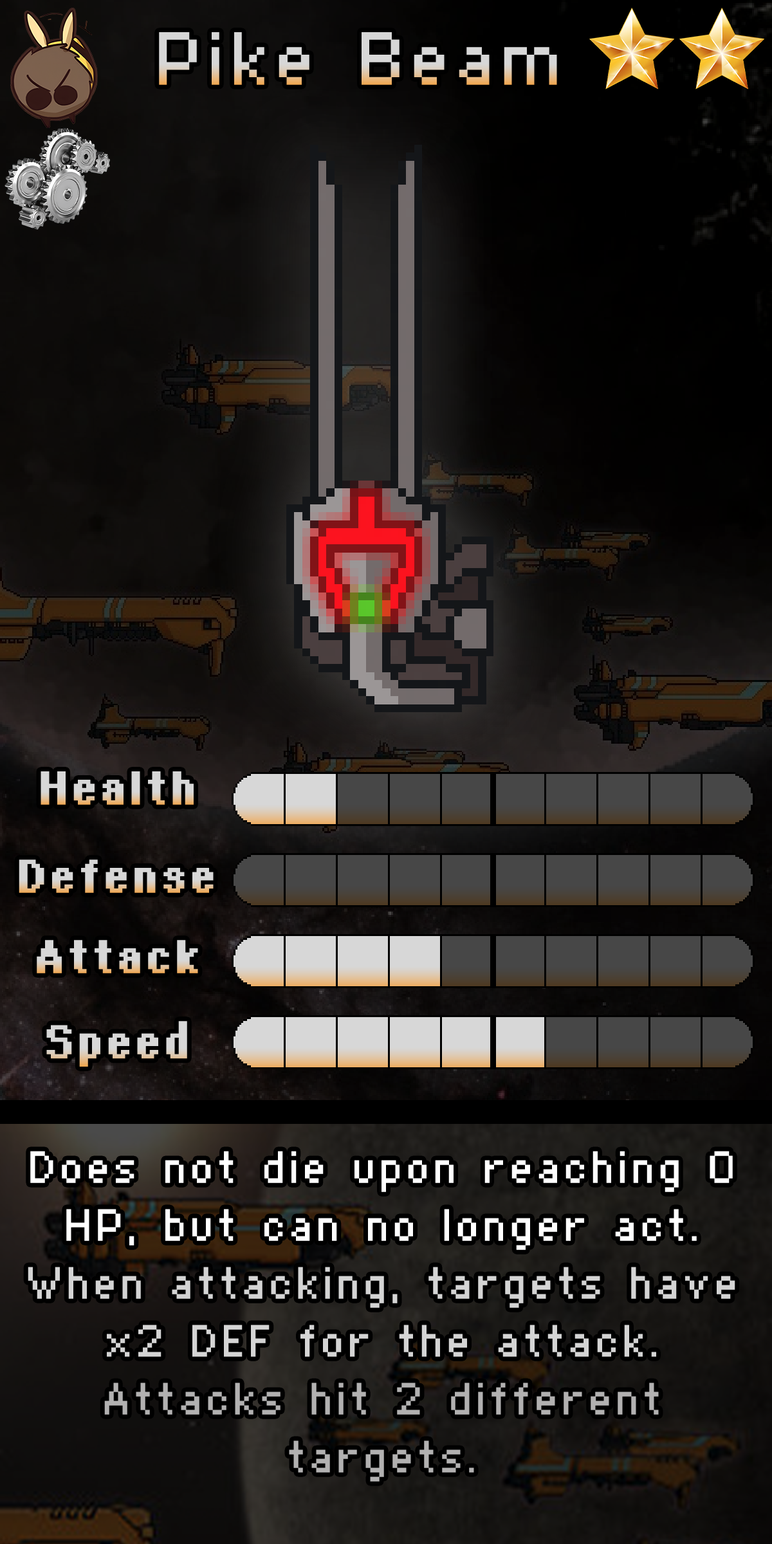
<style>
.page{position:relative;width:772px;height:1544px}
.page>*{position:absolute;margin:0}
.t1{font:128.7px "Supertext01"}
.t2{font:70.8px "Supertext02Bold"}
.t3{font:70.8px "Supertext02Bold";color:#d7d7d7}
.t4{font:77.2px/57.9px "Supertext01";color:#ffffff}
.t5{font:77.2px/57.9px "Supertext01";color:#d4d4d4}
.t6{font:77.2px/57.9px "Supertext01";color:#b2b1b1}
</style>
<div class="page">
<p class="t1" style="left:159px;top:32px;width:398px;height:53px">Pike Beam</p>
<p class="t2" style="left:41px;top:772px;width:153px;height:33px">Health</p>
<p class="t2" style="left:19px;top:860px;width:195px;height:33px">Defense</p>
<p class="t2" style="left:37px;top:940px;width:161px;height:34px">Attack</p>
<p class="t3" style="left:46px;top:1021px;width:141px;height:46px">Speed</p>
<p class="t4" style="left:28px;top:1151px;width:707px;height:331px;text-align:center">Does not die upon reaching 0 HP, but can no longer act.<br><span class="t5">When attacking, targets have x2 DEF for the attack.<br></span><span class="t6">Attacks hit 2 different targets.</span></p>
</div>
